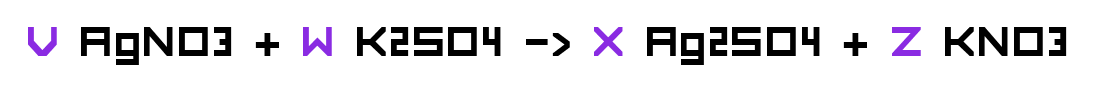
<style>
.page{position:relative;width:1100px;height:85px;background:#ffffff}
.page>*{position:absolute;margin:0}
.t1{font:55px "FORCED-SQUARE";color:#000000}
.t2{font:55px "FORCED-SQUARE";color:#8a2be2}
</style>
<div class="page">
<p class="t1" style="left:28px;top:27px;width:1039px;height:38px"><span class="t2">V</span> AgNO3 + <span class="t2">W </span>K2SO4 -&gt; <span class="t2">X</span> Ag2SO4 + <span class="t2">Z </span>KNO3</p>
</div>
